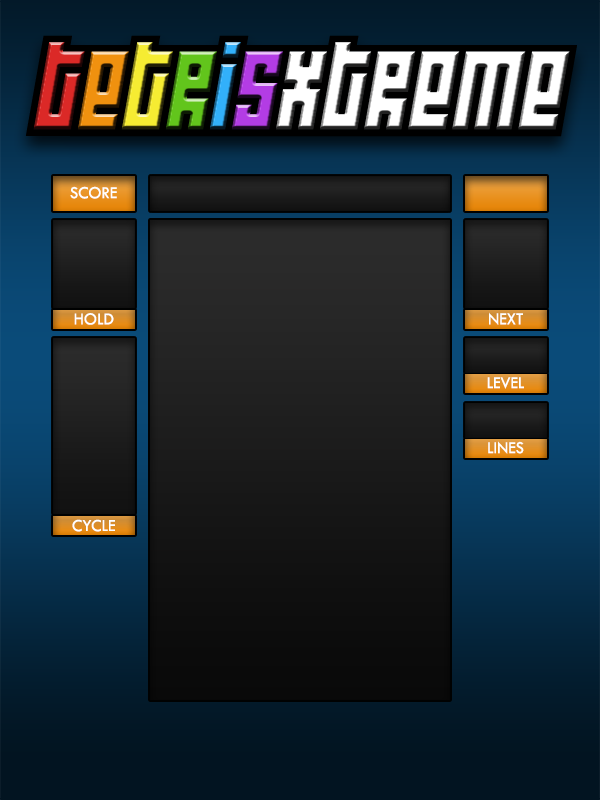
<style>
.page{position:relative;width:600px;height:800px}
.page>*{position:absolute;margin:0}
.t1{font:104.3px "Wideawake";color:#000000}
.t2{font:104.3px "WideawakeBlack"}
.t3{font:17.5px "TwCenMT-Regular";color:#ffffff;scale:0.97 1}
.t4{font:17.4px "TwCenMT-Regular";color:#ffffff}
.t5{font:17.5px "TwCenMT-Regular";color:#ffffff;scale:0.96 1}
</style>
<div class="page">
<p class="t1" style="left:25px;top:35px;width:552px;height:102px">tetrisxtreme</p>
<p class="t2" style="left:33px;top:42px;width:537px;height:88px">tetrisxtreme</p>
<p class="t3" style="left:70px;top:186px;width:47px;height:13px">SCORE</p>
<p class="t4" style="left:74px;top:313px;width:40px;height:12px">HOLD</p>
<p class="t4" style="left:489px;top:312px;width:34px;height:13px">NEXT</p>
<p class="t5" style="left:487px;top:377px;width:37px;height:12px">LEVEL</p>
<p class="t5" style="left:488px;top:441px;width:36px;height:13px">LINES</p>
<p class="t4" style="left:72px;top:519px;width:43px;height:13px">CYCLE</p>
</div>
